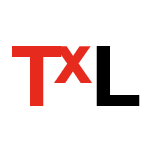
<style>
.page{position:relative;width:152px;height:152px;background:#ffffff}
.page>*{position:absolute;margin:0}
.t1{font:84px "HelveticaNeue-Bold";color:#e62b1e}
.t2{font:71px "HelveticaNeue-Bold";color:#e62b1e}
.t3{font:84px "HelveticaNeue-Bold";color:#000000}
</style>
<div class="page">
<p class="t1" style="left:12px;top:46px;width:128px;height:60px">T<span class="t2">x</span><span class="t3">L</span></p>
</div>
